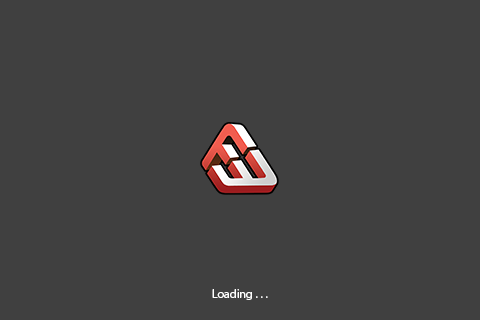
<style>
.page{position:relative;width:480px;height:320px;background:#404040}
.page>*{position:absolute;margin:0}
.t1{font:12px "MyriadPro-Regular";color:#ffffff}
</style>
<div class="page">
<p class="t1" style="left:212px;top:289px;width:56px;height:11px">Loading . . .</p>
</div>
